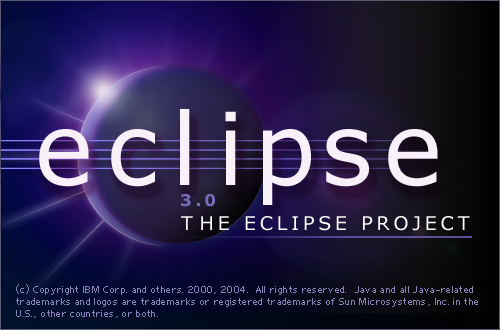
<style>
.page{position:relative;width:500px;height:330px}
.page>*{position:absolute;margin:0}
.t1{font:100px "Verdana";letter-spacing:0.1em;color:#f9f1fa}
.t2{font:100px "Verdana";letter-spacing:0.13em;color:#f9f1fa}
.t3{font:100px "Verdana";letter-spacing:-0.12em;color:#f9f1fa}
.t4{font:100px "Verdana";letter-spacing:-0.06em;color:#f9f1fa}
.t5{font:16px "Verdana-Bold";letter-spacing:0.2em;color:#786dbd}
.t6{font:19px "Verdana";letter-spacing:0.2em;color:#ffffff}
.t7{font:9px/12px "Photoshop Small";letter-spacing:0.04em;color:#8a83b8}
</style>
<div class="page">
<p class="t1" style="left:39px;top:109px;width:399px;height:96px"><span class="t2">ec</span><span class="t3">l</span><span class="t4">i</span>pse</p>
<p class="t5" style="left:181px;top:194px;width:34px;height:13px">3.0</p>
<p class="t6" style="left:181px;top:216px;width:289px;height:15px">THE ECLIPSE PROJECT</p>
<p class="t7" style="left:16px;top:284px;width:462px;height:34px">(c) Copyright IBM Corp. and others. 2000, 2004.  All rights reserved.  Java and all Java-related <br>trademarks and logos are trademarks or registered trademarks of Sun Microsystems, Inc. in the<br>U.S., other countries, or both.</p>
</div>
